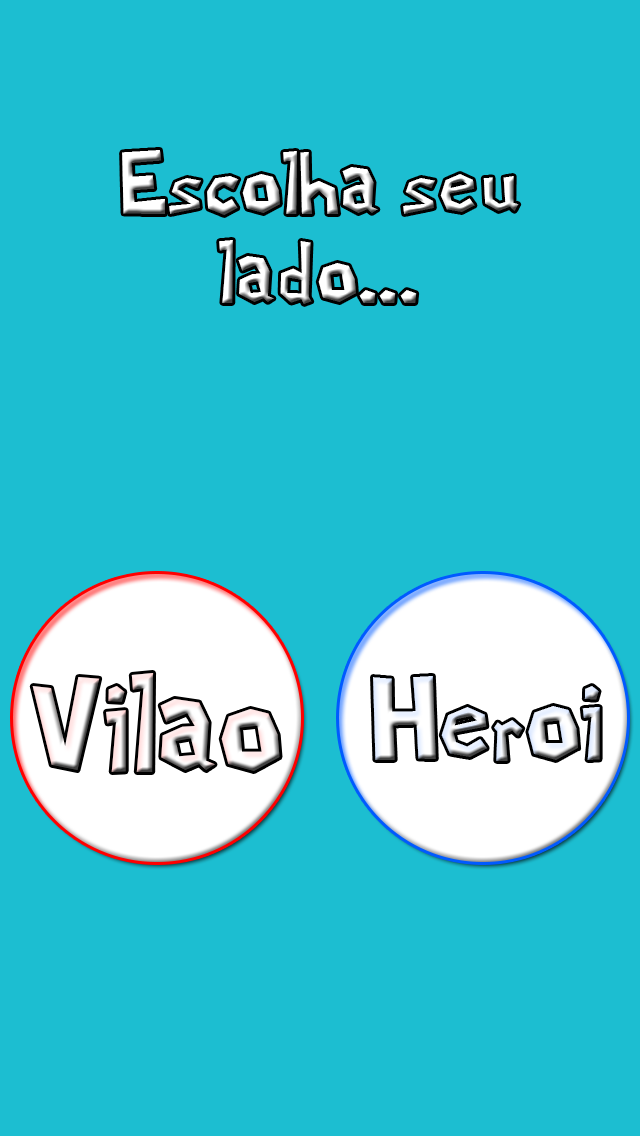
<style>
.page{position:relative;width:640px;height:1136px;background:#1cbed1}
.page>*{position:absolute;margin:0}
.t1{font:73.8px "MarioLuigiTwo"}
</style>
<div class="page">
<p class="t1" style="left:122px;top:150px;width:397px;height:154px;text-align:center">Escolha seu<br>lado...</p>
</div>
